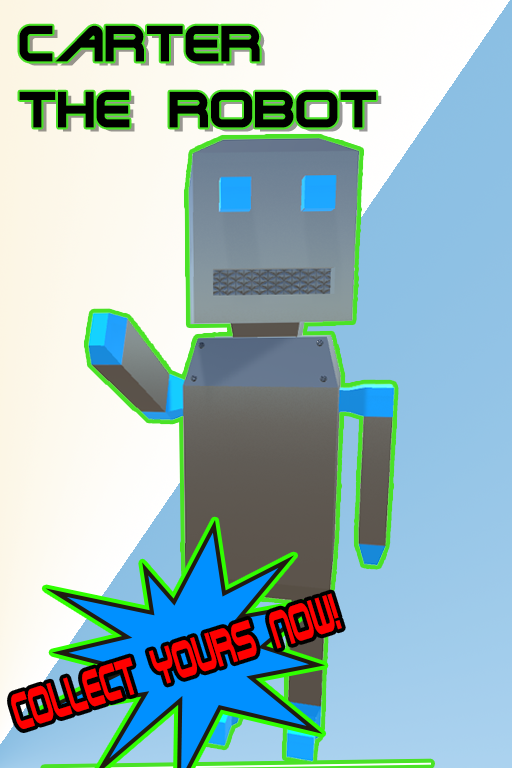
<style>
.page{position:relative;width:512px;height:768px}
.page>*{position:absolute;margin:0}
.t1{font:55.1px "TerminatorTwo";color:#000000}
.t2{font:55.4px "TerminatorTwo";color:#ff0000;scale:0.49 1}
</style>
<div class="page">
<p class="t1" style="left:19px;top:25px;width:358px;height:103px">Carter <br>the robot</p>
<p class="t2" style="left:11px;top:593px;width:331px;height:136px;rotate:-18deg">Collect yours now!</p>
</div>
